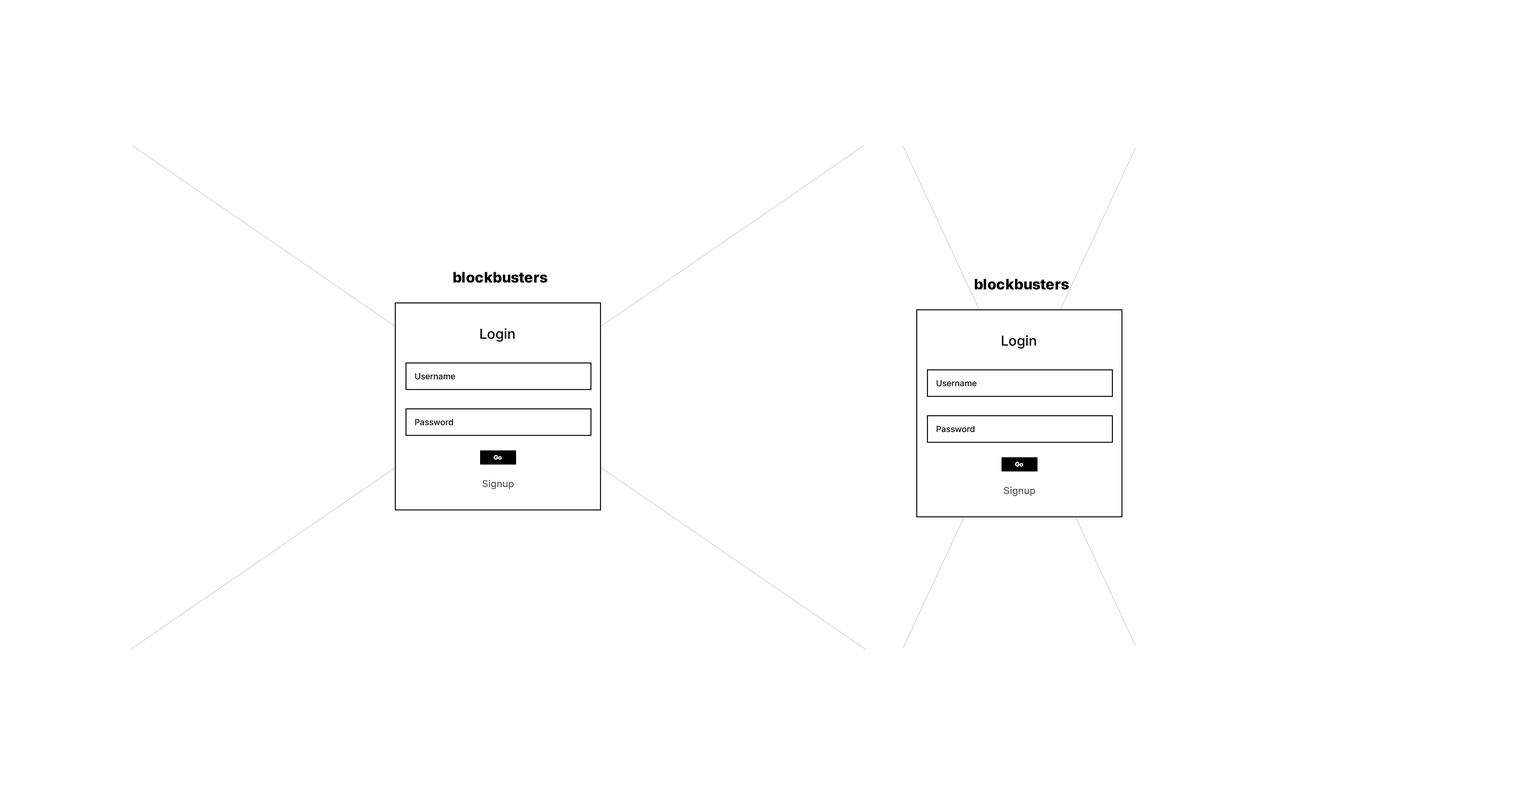
<style>
.page{position:relative;width:1518px;height:806px;background:#ffffff}
.page>*{position:absolute;margin:0}
.t1{font:14.4px "Inter-ExtraBold";color:#000000}
.t2{font:13.8px "Inter-Medium";color:#000000}
.t3{font:8.3px "Inter-Medium";color:#000000}
.t4{font:6.1px "Inter-ExtraBold";color:#ffffff}
.t5{font:9.7px "Inter-Medium";color:#595959}
</style>
<div class="page">
<p class="t1" style="left:453px;top:272px;width:94px;height:11px">blockbusters</p>
<p class="t1" style="left:975px;top:279px;width:94px;height:11px">blockbusters</p>
<p class="t2" style="left:480px;top:328px;width:34px;height:14px">Login</p>
<p class="t2" style="left:1001px;top:335px;width:35px;height:14px">Login</p>
<p class="t3" style="left:415px;top:373px;width:40px;height:7px">Username</p>
<p class="t3" style="left:936px;top:380px;width:40px;height:7px">Username</p>
<p class="t3" style="left:415px;top:419px;width:38px;height:7px">Password</p>
<p class="t3" style="left:936px;top:426px;width:38px;height:7px">Password</p>
<p class="t4" style="left:493px;top:455px;width:9px;height:5px">Go</p>
<p class="t4" style="left:1015px;top:462px;width:8px;height:5px">Go</p>
<p class="t5" style="left:482px;top:480px;width:32px;height:10px">Signup</p>
<p class="t5" style="left:1004px;top:487px;width:31px;height:9px">Signup</p>
</div>
